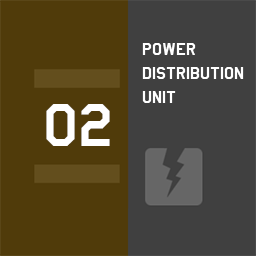
<style>
.page{position:relative;width:256px;height:256px;background:#404040}
.page>*{position:absolute;margin:0}
.t1{font:20px "AmarilloUSAF";color:#ffffff}
.t2{font:70px "AmarilloUSAF";color:#ffffff}
</style>
<div class="page">
<p class="t1" style="left:142px;top:43px;width:102px;height:60px">power<br>distribution<br>unit</p>
<p class="t2" style="left:46px;top:104px;width:64px;height:42px">02</p>
</div>
